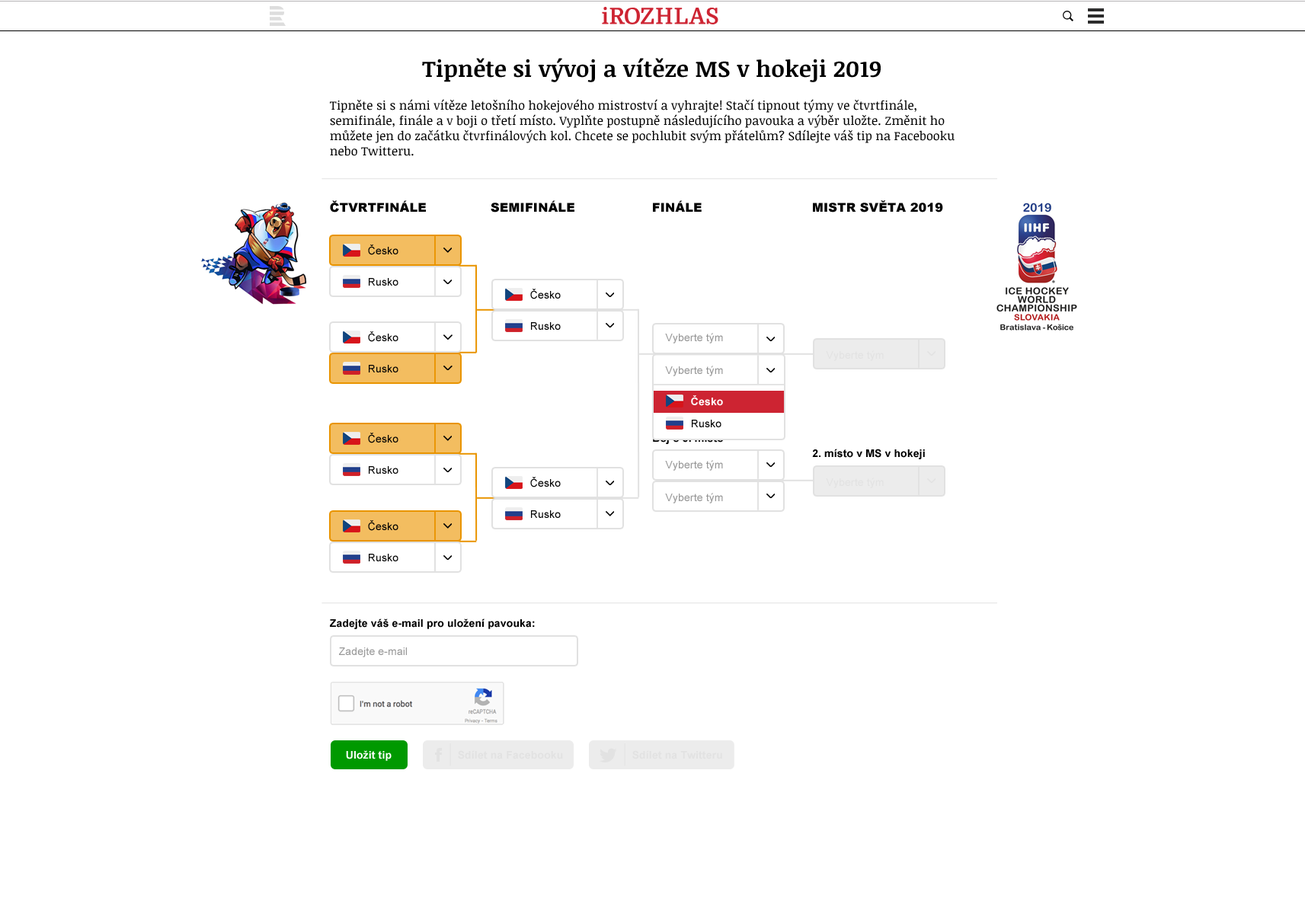
<style>
.page{position:relative;width:1305px;height:914px;background:#ffffff}
.page>*{position:absolute;margin:0}
.t1{font:22.8px "NoticiaText-Bold";letter-spacing:0.01em;color:#000000}
.t2{font:12.2px/15.2px "NoticiaText-Regular";letter-spacing:0.01em;color:#000000}
.t3{font:12.2px "Arial-Black";letter-spacing:0.01em;color:#000000}
.t4{font:12.2px "Arial-Black";letter-spacing:0.01em;color:#010101}
.t5{font:10.7px "ArialMT";letter-spacing:0.01em;color:#010101}
.t6{font:10.7px "ArialMT";letter-spacing:0.01em;color:#999999}
.t7{font:10.7px "ArialMT";letter-spacing:0.01em;color:#e2e2e2}
.t8{font:10.7px "Arial-BoldMT";letter-spacing:0.01em;color:#ffffff}
.t9{font:10.7px "Arial-BoldMT";letter-spacing:0.01em}
.t10{font:10.7px "Arial-BoldMT";letter-spacing:0.01em;color:#000000}
.t11{font:10.7px "Arial-BoldMT";letter-spacing:0.01em;color:#e2e2e2}
</style>
<div class="page">
<p class="t1" style="left:422px;top:58px;width:458px;height:24px">Tipněte si vývoj a vítěze MS v hokeji 2019</p>
<p class="t2" style="left:330px;top:99px;width:624px;height:57px">Tipněte si s námi vítěze letošního hokejového mistroství a vyhrajte! Stačí tipnout týmy ve čtvrtfinále, semifinále, finále a v boji o třetí místo. Vyplňte postupně následujícího pavouka a výběr uložte. Změnit ho můžete jen do začátku čtvrfinálových kol. Chcete se pochlubit svým přátelům? Sdílejte váš tip na Facebooku nebo Twitteru.</p>
<p class="t3" style="left:330px;top:200px;width:96px;height:12px">ČTVRTFINÁLE</p>
<p class="t3" style="left:490px;top:200px;width:84px;height:12px">SEMIFINÁLE</p>
<p class="t3" style="left:653px;top:200px;width:48px;height:12px">FINÁLE</p>
<p class="t4" style="left:813px;top:200px;width:130px;height:12px">MISTR SVĚTA 2019</p>
<p class="t5" style="left:368px;top:244px;width:30px;height:11px">Česko</p>
<p class="t5" style="left:369px;top:278px;width:29px;height:8px">Rusko</p>
<p class="t5" style="left:530px;top:289px;width:31px;height:10px">Česko</p>
<p class="t5" style="left:531px;top:322px;width:30px;height:8px">Rusko</p>
<p class="t5" style="left:368px;top:331px;width:30px;height:11px">Česko</p>
<p class="t6" style="left:665px;top:333px;width:58px;height:10px">Vyberte tým</p>
<p class="t7" style="left:826px;top:350px;width:57px;height:11px">Vyberte tým</p>
<p class="t5" style="left:369px;top:365px;width:29px;height:7px">Rusko</p>
<p class="t6" style="left:665px;top:366px;width:58px;height:10px">Vyberte tým</p>
<p class="t8" style="left:691px;top:395px;width:32px;height:11px">Česko</p>
<p class="t5" style="left:692px;top:420px;width:29px;height:7px">Rusko</p>
<p class="t5" style="left:368px;top:433px;width:30px;height:10px">Česko</p>
<p class="t9" style="left:653px;top:433px;width:71px;height:11px">Boj o 3. místo</p>
<p class="t10" style="left:812px;top:449px;width:113px;height:10px">2. místo v MS v hokeji</p>
<p class="t6" style="left:665px;top:460px;width:58px;height:11px">Vyberte tým</p>
<p class="t5" style="left:369px;top:466px;width:29px;height:8px">Rusko</p>
<p class="t5" style="left:530px;top:477px;width:31px;height:10px">Česko</p>
<p class="t7" style="left:826px;top:478px;width:57px;height:10px">Vyberte tým</p>
<p class="t6" style="left:665px;top:493px;width:58px;height:10px">Vyberte tým</p>
<p class="t5" style="left:368px;top:520px;width:30px;height:11px">Česko</p>
<p class="t5" style="left:531px;top:510px;width:30px;height:8px">Rusko</p>
<p class="t5" style="left:369px;top:554px;width:29px;height:7px">Rusko</p>
<p class="t10" style="left:330px;top:618px;width:205px;height:11px">Zadejte váš e-mail pro uložení pavouka:</p>
<p class="t6" style="left:339px;top:647px;width:68px;height:10px">Zadejte e-mail</p>
<p class="t8" style="left:346px;top:750px;width:45px;height:11px">Uložit tip</p>
<p class="t11" style="left:458px;top:750px;width:105px;height:9px">Sdílet na Facebooku</p>
<p class="t11" style="left:632px;top:750px;width:90px;height:9px">Sdílet na Twitteru</p>
</div>
